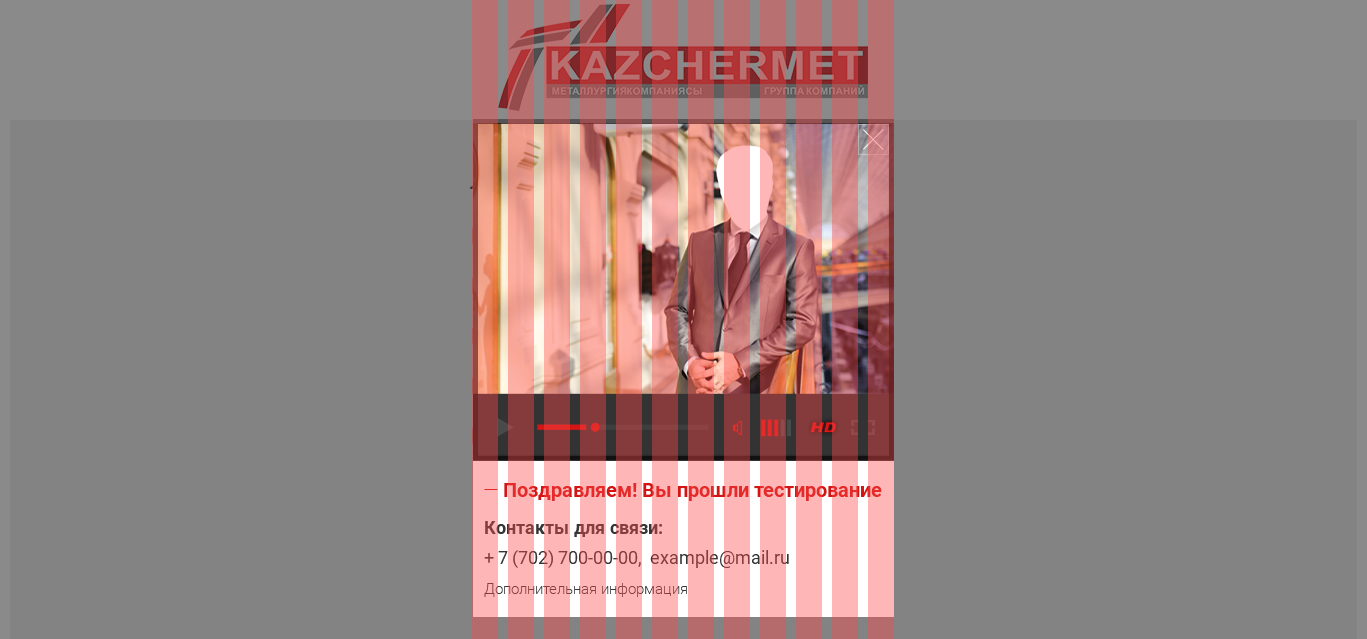
<style>
.page{position:relative;width:1367px;height:639px;background:#838383}
.page>*{position:absolute;margin:0}
.t1{font:20px "Roboto-Bold";color:#d51414}
.t2{font:20px "Roboto-Light";color:#d51414}
.t3{font:18px/30px "Roboto-Regular";color:#863d3d}
.t4{font:18px/30px "Roboto-Bold";color:#863d3d}
.t5{font:15px/30px "Roboto-Light";color:#863d3d}
</style>
<div class="page">
<p class="t1" style="left:484px;top:483px;width:398px;height:18px"><span class="t2">—</span> Поздравляем! Вы прошли тестирование</p>
<p class="t3" style="left:484px;top:521px;width:305px;height:76px"><span class="t4">Контакты для связи:<br></span>+ 7 (702) 700-00-00,  example@mail.ru <br><span class="t5">Дополнительная информация</span></p>
</div>
